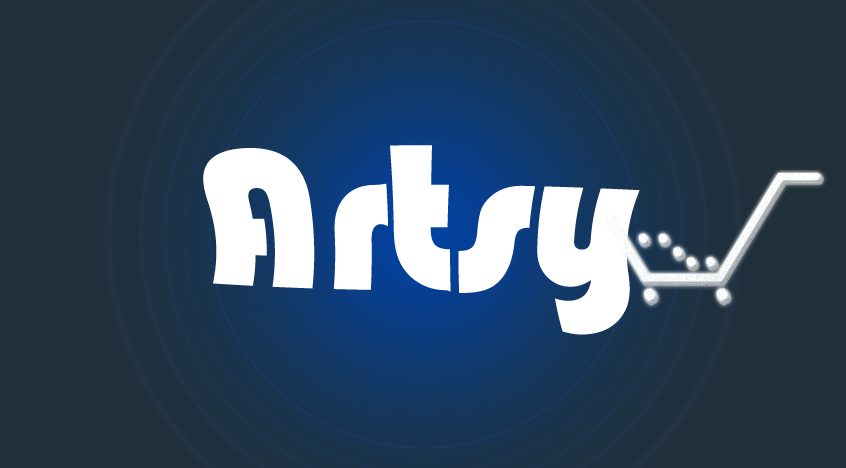
<style>
.page{position:relative;width:846px;height:468px;background:#212f39}
.page>*{position:absolute;margin:0}
.t1{font:188.6px "Bauhaus93";color:#ffffff;scale:1.26 1}
</style>
<div class="page">
<p class="t1" style="left:203px;top:145px;width:437px;height:190px">Artsy</p>
</div>
